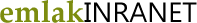
<style>
.page{position:relative;width:197px;height:23px;background:#ffffff}
.page>*{position:absolute;margin:0}
.t1{font:30px "PalatinoLinotype-Bold";color:#7c8c0f}
.t2{font:28px "Ebrima";color:#000000}
</style>
<div class="page">
<p class="t1" style="left:0px;top:0px;width:84px;height:23px">emlak</p>
<p class="t2" style="left:84px;top:2px;width:113px;height:20px">INRANET</p>
</div>
